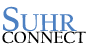
<style>
.page{position:relative;width:88px;height:53px;background:#ffffff}
.page>*{position:absolute;margin:0}
.t1{font:36px "CalifornianFB-Bold";color:#4c80c2;font-variant:small-caps}
.t2{font:17px "CalifornianFB-Bold";color:#000000;font-variant:small-caps}
</style>
<div class="page">
<p class="t1" style="left:3px;top:6px;width:74px;height:26px">Suhr</p>
<p class="t2" style="left:2px;top:31px;width:84px;height:13px">CONNECT</p>
</div>
